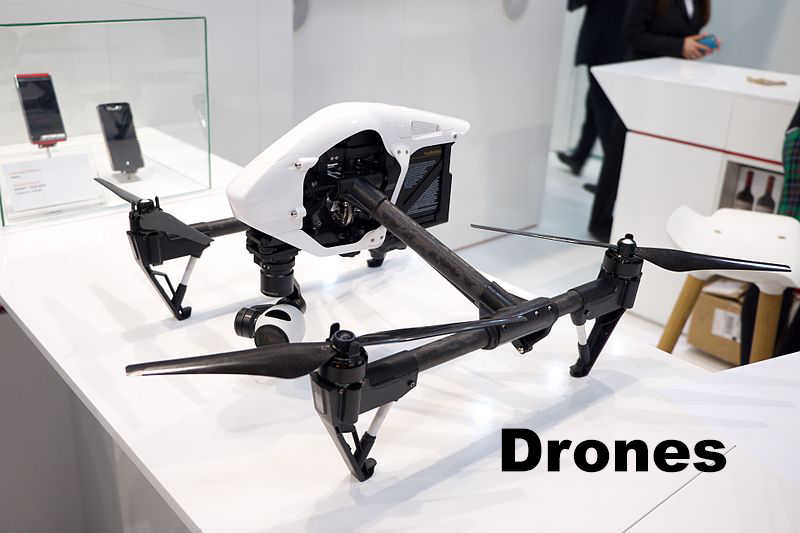
<style>
.page{position:relative;width:800px;height:533px}
.page>*{position:absolute;margin:0}
.t1{font:60px "Arial-Black";color:#000000}
</style>
<div class="page">
<p class="t1" style="left:501px;top:428px;width:226px;height:45px">Drones</p>
</div>
